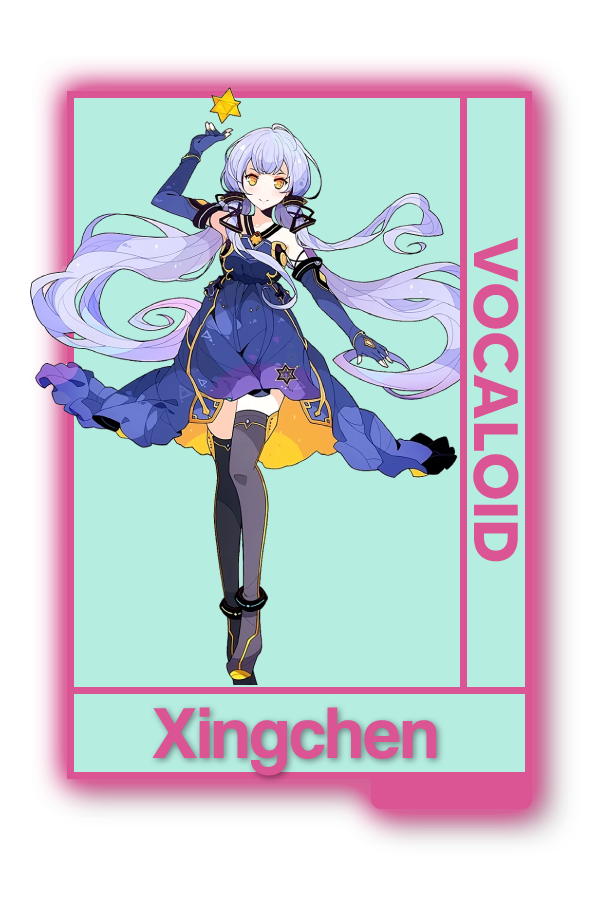
<style>
.page{position:relative;width:600px;height:900px;background:#b5ede1}
.page>*{position:absolute;margin:0}
.t1{font:62.5px "MADETOMMY-Bold";color:#db5493}
.t2{font:75px "CoolveticaRg-Regular";color:#db5493}
</style>
<div class="page">
<p class="t1" style="left:473px;top:237px;width:46px;height:325px;rotate:90deg">VOCALOID</p>
<p class="t2" style="left:152px;top:707px;width:285px;height:69px">Xingchen</p>
</div>
